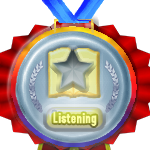
<style>
.page{position:relative;width:150px;height:150px;background:#ffffff}
.page>*{position:absolute;margin:0}
.t1{font:13.8px "AgencyFB-Bold";color:#fdffa4;scale:1.05 1}
</style>
<div class="page">
<p class="t1" style="left:53px;top:111px;width:44px;height:15px">Listening</p>
</div>
